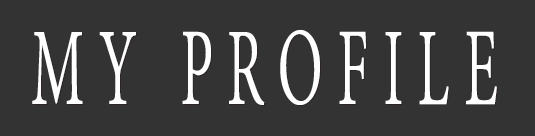
<style>
.page{position:relative;width:535px;height:136px;background:#333333}
.page>*{position:absolute;margin:0}
.t1{font:135.6px "AdobeThai-Regular";letter-spacing:0.2em;color:#ffffff;text-transform:uppercase;scale:0.54 1}
</style>
<div class="page">
<p class="t1" style="left:32px;top:29px;width:465px;height:76px">MY PROFILE</p>
</div>
